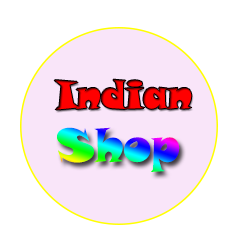
<style>
.page{position:relative;width:250px;height:250px;background:#ffffff}
.page>*{position:absolute;margin:0}
.t1{font:39px "SnapITC-Regular";color:#ff0000}
.t2{font:46px "SnapITC-Regular"}
</style>
<div class="page">
<p class="t1" style="left:54px;top:79px;width:138px;height:31px">Indian</p>
<p class="t2" style="left:57px;top:127px;width:123px;height:45px">Shop</p>
</div>
